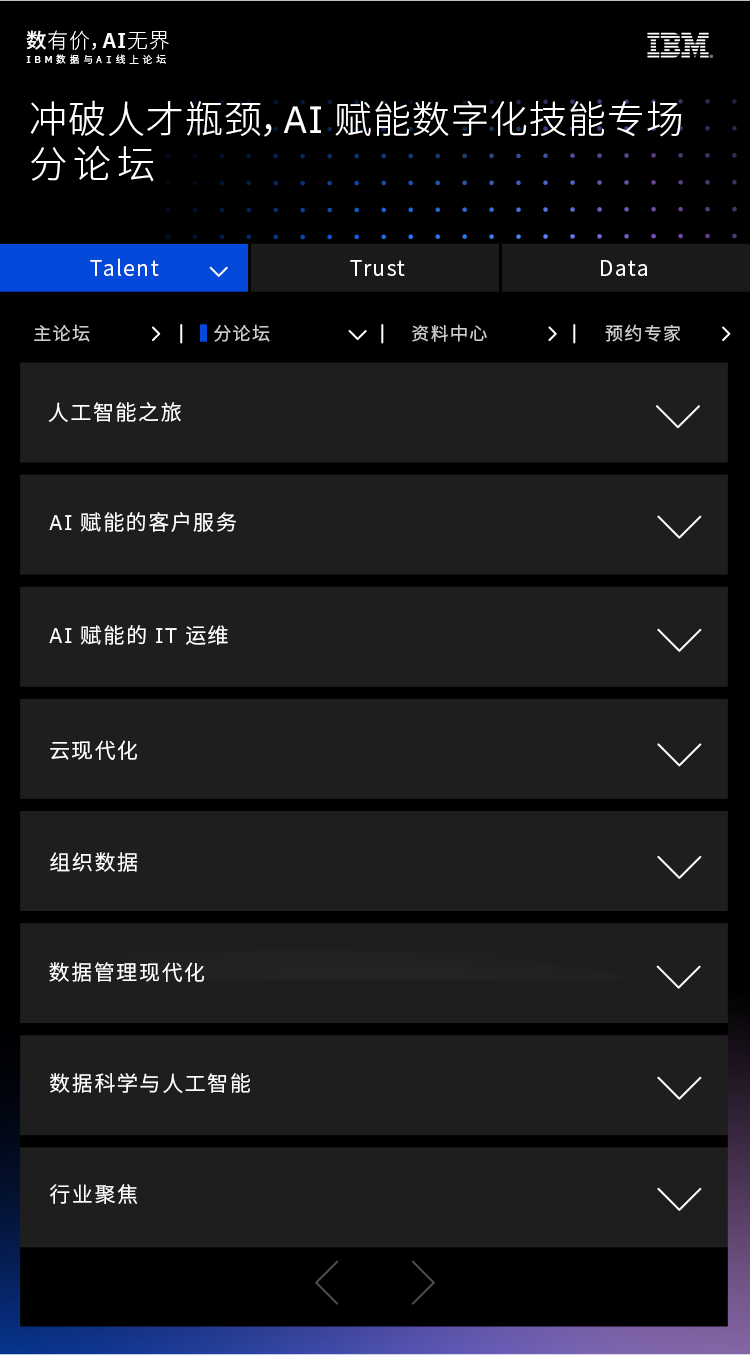
<style>
.page{position:relative;width:750px;height:1355px;background:#1e1e1e}
.page>*{position:absolute;margin:0}
.t1{font:20.7px "NotoSansCJKsc-Thin";letter-spacing:0.05em;color:#ffffff}
.t2{font:20.7px "NotoSansCJKsc-Medium";letter-spacing:0.05em;color:#ffffff}
.t3{font:20.7px "NotoSansCJKsc-Light";letter-spacing:0.05em;color:#ffffff}
.t4{font:20.7px "IBMPlexSans-SemiBold";letter-spacing:0.05em;color:#ffffff}
.t5{font:9.8px "NotoSansCJKsc-Light";letter-spacing:0.37em;color:#ffffff}
.t6{font:9.8px "IBMPlexSans-Medium";letter-spacing:0.37em;color:#ffffff}
.t7{font:9.8px "IBMPlexMono-Light";letter-spacing:0.37em;color:#ffffff}
.t8{font:38px "NotoSansCJKsc-Light";letter-spacing:0.025em;color:#ffffff}
.t9{font:38px "IBMPlexSans";letter-spacing:0.025em;color:#ffffff}
.t10{font:38px "NotoSansCJKsc-Light";letter-spacing:0.15em;color:#ffffff}
.t11{font:21px "NotoSansCJKsc-DemiLight";letter-spacing:0.075em;color:#ffffff}
.t12{font:18px "NotoSansCJKsc-DemiLight";letter-spacing:0.075em;color:#cccccc}
.t13{font:21px "IBMPlexSans";letter-spacing:0.075em;color:#ffffff}
</style>
<div class="page">
<p class="t1" style="left:26px;top:30px;width:143px;height:20px"><span class="t2">数</span>有价<span class="t3">，</span><span class="t4">AI</span>无界</p>
<p class="t5" style="left:26px;top:54px;width:140px;height:10px"><span class="t6">IBM</span>数据与<span class="t7">AI</span>线上论坛</p>
<p class="t8" style="left:30px;top:100px;width:652px;height:37px">冲破人才瓶颈，<span class="t9">AI </span>赋能数字化技能专场</p>
<p class="t10" style="left:31px;top:146px;width:123px;height:36px">分论坛</p>
<p class="t11" style="left:90px;top:258px;width:69px;height:18px">Talent</p>
<p class="t11" style="left:350px;top:260px;width:55px;height:16px">Trust</p>
<p class="t11" style="left:601px;top:260px;width:46px;height:16px">Data</p>
<p class="t12" style="left:34px;top:324px;width:56px;height:18px">主论坛</p>
<p class="t12" style="left:214px;top:324px;width:56px;height:18px">分论坛</p>
<p class="t12" style="left:412px;top:324px;width:75px;height:18px">资料中心</p>
<p class="t12" style="left:605px;top:324px;width:76px;height:18px">预约专家</p>
<p class="t11" style="left:48px;top:402px;width:133px;height:20px">人工智能之旅</p>
<p class="t11" style="left:49px;top:512px;width:187px;height:20px"><span class="t13">AI</span> 赋能的客户服务</p>
<p class="t11" style="left:49px;top:625px;width:179px;height:20px"><span class="t13">AI </span>赋能的<span class="t13"> IT </span>运维</p>
<p class="t11" style="left:50px;top:740px;width:87px;height:20px">云现代化</p>
<p class="t11" style="left:50px;top:852px;width:88px;height:20px">组织数据</p>
<p class="t11" style="left:49px;top:962px;width:155px;height:20px">数据管理现代化</p>
<p class="t11" style="left:50px;top:1073px;width:200px;height:20px">数据科学与人工智能</p>
<p class="t11" style="left:50px;top:1184px;width:88px;height:20px">行业聚焦</p>
</div>
